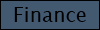
<style>
.page{position:relative;width:100px;height:30px;background:#435970}
.page>*{position:absolute;margin:0}
.t1{font:20px "LucidaSans";color:#000000}
</style>
<div class="page">
<p class="t1" style="left:14px;top:7px;width:72px;height:15px">Finance</p>
</div>
